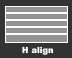
<style>
.page{position:relative;width:72px;height:58px;background:#333333}
.page>*{position:absolute;margin:0}
.t1{font:8.3px "Arial-Black";color:#ffffff}
</style>
<div class="page">
<p class="t1" style="left:22px;top:46px;width:32px;height:9px">H align</p>
</div>
